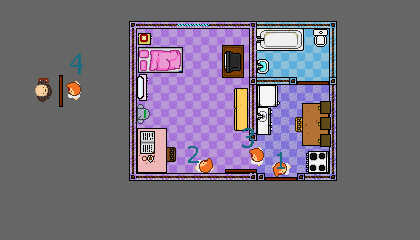
<style>
.page{position:relative;width:420px;height:240px;background:#666666}
.page>*{position:absolute;margin:0}
.t1{font:27.3px "Tahoma";color:#176d82}
.t2{font:23.4px "Tahoma";color:#176d82}
.t3{font:22.6px "Tahoma";color:#176d82;scale:1.03 1}
</style>
<div class="page">
<p class="t1" style="left:70px;top:54px;width:13px;height:20px">4</p>
<p class="t1" style="left:242px;top:128px;width:12px;height:20px">3</p>
<p class="t2" style="left:188px;top:146px;width:11px;height:17px">2</p>
<p class="t3" style="left:277px;top:152px;width:8px;height:17px">1</p>
</div>
